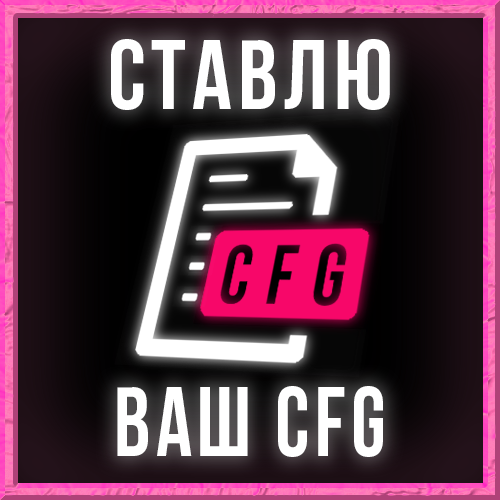
<style>
.page{position:relative;width:500px;height:500px}
.page>*{position:absolute;margin:0}
.t1{font:98px "BebasNeueBold";letter-spacing:0.06em;color:#ffffff}
.t2{font:98px "BebasNeueBold";letter-spacing:0.06em;color:#ffffff;scale:0.91 1}
</style>
<div class="page">
<p class="t1" style="left:111px;top:39px;width:279px;height:71px">ставлю</p>
<p class="t2" style="left:117px;top:386px;width:266px;height:71px">ваш cfg</p>
</div>
